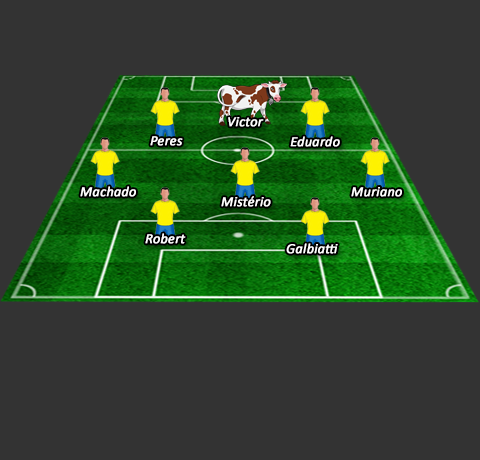
<style>
.page{position:relative;width:480px;height:460px;background:#333333}
.page>*{position:absolute;margin:0}
.t1{font:14px "Calibri-Italic";color:#ffffff;font-weight:bold}
</style>
<div class="page">
<p class="t1" style="left:228px;top:117px;width:36px;height:10px">Victor</p>
<p class="t1" style="left:150px;top:136px;width:33px;height:10px">Peres</p>
<p class="t1" style="left:290px;top:136px;width:50px;height:11px">Eduardo</p>
<p class="t1" style="left:80px;top:186px;width:56px;height:11px">Machado</p>
<p class="t1" style="left:221px;top:196px;width:50px;height:11px">Mistério</p>
<p class="t1" style="left:351px;top:187px;width:51px;height:10px">Muriano</p>
<p class="t1" style="left:145px;top:233px;width:41px;height:11px">Robert</p>
<p class="t1" style="left:286px;top:243px;width:52px;height:11px">Galbiatti</p>
</div>
